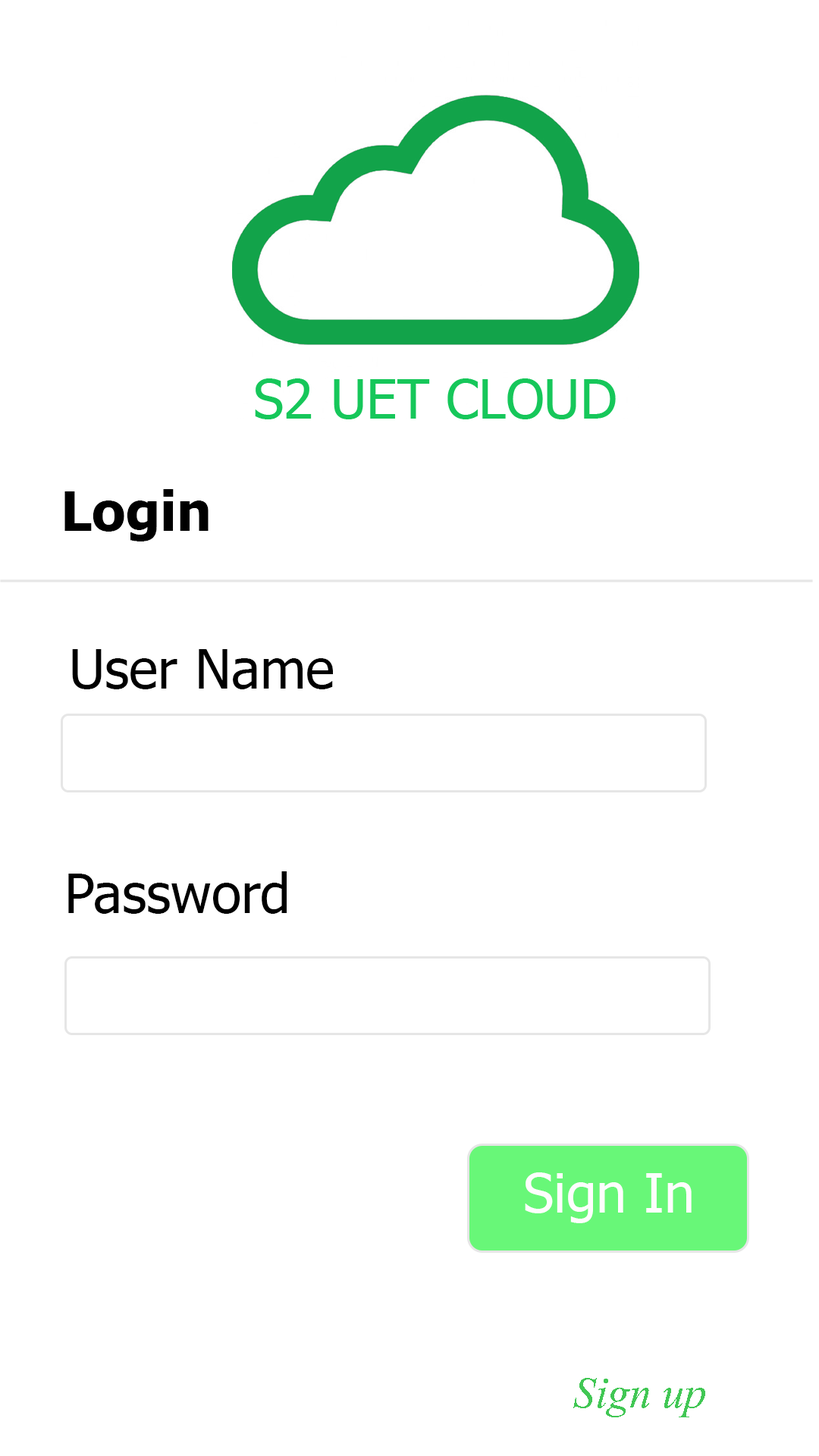
<style>
.page{position:relative;width:819px;height:1456px;background:#ffffff}
.page>*{position:absolute;margin:0}
.t1{font:54.6px "Tahoma-Bold";color:#000000}
.t2{font:54.6px "Tahoma";color:#000000}
.t3{font:54.6px "Tahoma";color:#fefdfd}
.t4{font:54.6px "Vijaya";color:#41c754}
</style>
<div class="page">
<p class="t1" style="left:64px;top:489px;width:145px;height:52px">Login</p>
<p class="t2" style="left:72px;top:649px;width:261px;height:40px">User Name</p>
<p class="t2" style="left:68px;top:871px;width:219px;height:43px">Password</p>
<p class="t3" style="left:525px;top:1172px;width:167px;height:51px">Sign In</p>
<p class="t4" style="left:573px;top:1378px;width:132px;height:39px">Sign up</p>
</div>
